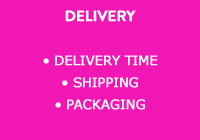
<style>
.page{position:relative;width:200px;height:140px;background:#f117b5}
.page>*{position:absolute;margin:0}
.t1{font:13px/22px "Verdana";letter-spacing:-0.02em;color:#ffffff;font-weight:bold}
.t2{font:15px/22px "BrandonGrotesque-Bold";letter-spacing:-0.02em;color:#ffffff;font-weight:bold}
</style>
<div class="page">
<p class="t1" style="left:43px;top:10px;width:115px;height:100px;text-align:center"><span class="t2">DELIVERY<br><br></span>• DELIVERY TIME<br>• SHIPPING<br>• PACKAGING</p>
</div>
